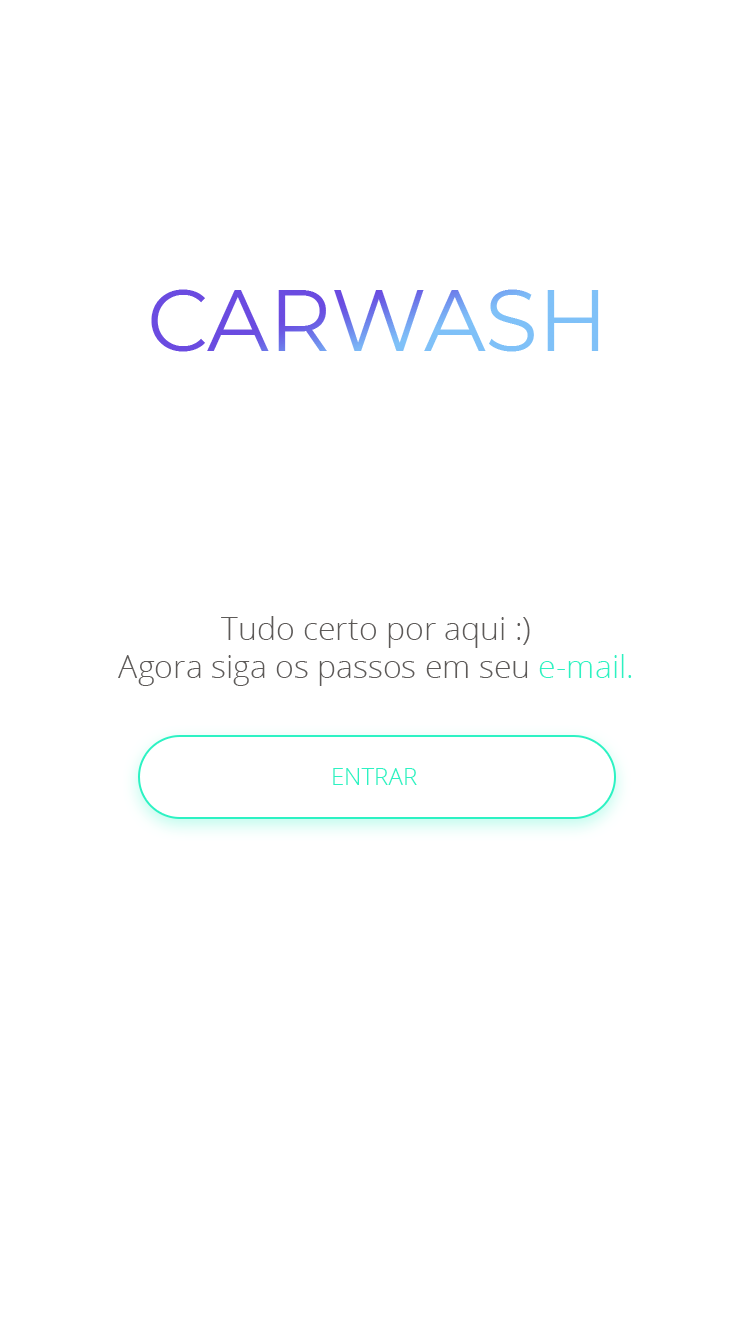
<style>
.page{position:relative;width:750px;height:1334px;background:#ffffff}
.page>*{position:absolute;margin:0}
.t1{font:32px "OpenSans-Light";color:#5d5a58}
.t2{font:32px "OpenSans-Light";color:#2cf2c3}
.t3{font:24px "OpenSans-Light";color:#2cf2c3}
</style>
<div class="page">
<p class="t1" style="left:118px;top:616px;width:514px;height:70px;text-align:center">Tudo certo por aqui :)<br>Agora siga os passos em seu <span class="t2">e-mail.</span></p>
<p class="t3" style="left:333px;top:768px;width:84px;height:17px">ENTRAR</p>
</div>
